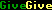
<style>
.page{position:relative;width:52px;height:10px;background:#000000}
.page>*{position:absolute;margin:0}
.t1{font:13.2px "Onesize";color:#009900;scale:0.91 1}
.t2{font:13.2px "Onesize";color:#ffff66;scale:0.91 1}
</style>
<div class="page">
<p class="t1" style="left:0px;top:1px;width:26px;height:8px">Give</p>
<p class="t2" style="left:26px;top:1px;width:26px;height:8px">Give</p>
</div>
